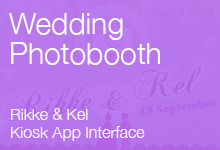
<style>
.page{position:relative;width:220px;height:150px}
.page>*{position:absolute;margin:0}
.t1{font:30px/30px "HelveticaNeue-Light";color:#ffffff}
.t2{font:16px/18px "HelveticaNeue-Light";color:#ffffff}
</style>
<div class="page">
<p class="t1" style="left:9px;top:13px;width:151px;height:52px">Wedding<br>Photobooth</p>
<p class="t2" style="left:11px;top:108px;width:134px;height:33px">Rikke &amp; Kel<br>Kiosk App Interface</p>
</div>
